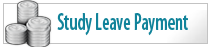
<style>
.page{position:relative;width:211px;height:47px;background:#ffffff}
.page>*{position:absolute;margin:0}
.t1{font:24px "MyriadPro-SemiboldCond";color:#11839a;scale:0.78 1}
</style>
<div class="page">
<p class="t1" style="left:57px;top:13px;width:131px;height:23px">Study Leave Payment</p>
</div>
